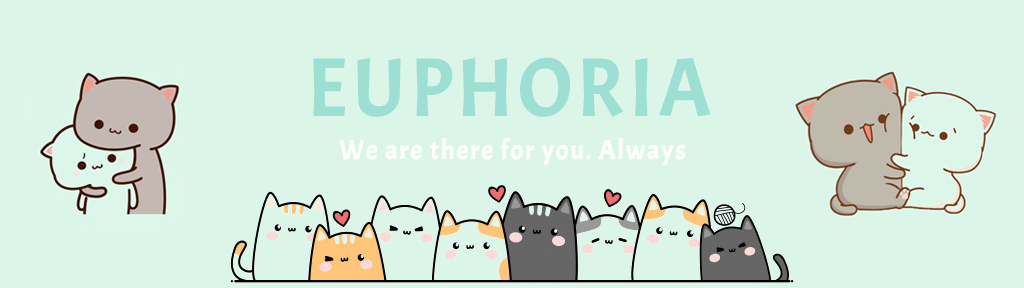
<style>
.page{position:relative;width:1024px;height:288px;background:#dbf6e9}
.page>*{position:absolute;margin:0}
.t1{font:82px "Acme-Regular";letter-spacing:0.03em;color:#9ddfd3;text-transform:uppercase;font-weight:bold}
.t2{font:27px "Acme-Regular";letter-spacing:0.03em;color:#ffffff;font-weight:bold}
</style>
<div class="page">
<p class="t1" style="left:313px;top:57px;width:398px;height:60px">Euphoria</p>
<p class="t2" style="left:339px;top:138px;width:347px;height:28px">We are there for you. Always</p>
</div>
